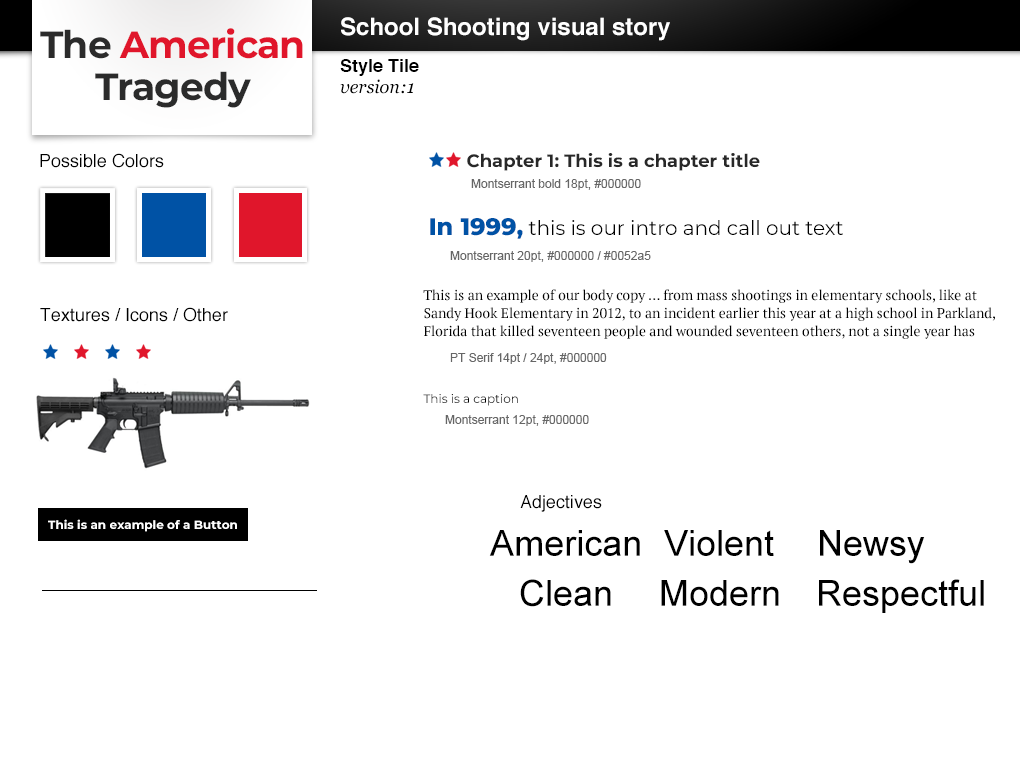
<style>
.page{position:relative;width:1020px;height:760px;background:#ffffff}
.page>*{position:absolute;margin:0}
.t1{font:24px "Helvetica-Bold";color:#ffffff}
.t2{font:37.7px/41.4px "Montserrat-Bold";letter-spacing:-0.025em;color:#e0162b}
.t3{font:37.7px/41.4px "Montserrat-Bold";letter-spacing:-0.025em;color:#2b2b2b}
.t4{font:18px "Helvetica-Bold";color:#000000}
.t5{font:18px "Georgia-Italic";color:#000000}
.t6{font:18px "Helvetica";color:#000000}
.t7{font:18px "Montserrat-Bold";color:#282828}
.t8{font:12px "ArialMT";color:#666666}
.t9{font:20px "Montserrat-Regular";color:#000000}
.t10{font:24px "Montserrat-ExtraBold";color:#0052a5}
.t11{font:14px/18px "PTSerif-Regular";color:#000000}
.t12{font:12px "Montserrat-Regular";color:#000000}
.t13{font:12px "Montserrat-Bold";color:#ffffff}
.t14{font:36px "ArialMT";color:#000000}
</style>
<div class="page">
<p class="t1" style="left:341px;top:17px;width:329px;height:24px">School Shooting visual story</p>
<p class="t2" style="left:40px;top:28px;width:263px;height:80px;text-align:center"><span class="t3">The </span>American<span class="t3"><br>Tragedy</span></p>
<p class="t4" style="left:340px;top:59px;width:79px;height:17px">Style Tile</p>
<p class="t5" style="left:340px;top:79px;width:74px;height:15px">version:1</p>
<p class="t6" style="left:40px;top:153px;width:124px;height:15px">Possible Colors</p>
<p class="t7" style="left:467px;top:153px;width:293px;height:18px">Chapter 1: This is a chapter title</p>
<p class="t8" style="left:471px;top:179px;width:170px;height:11px">Montserrant bold 18pt, #000000</p>
<p class="t9" style="left:430px;top:218px;width:413px;height:21px"><span class="t10">In 1999,</span> this is our intro and call out text</p>
<p class="t8" style="left:450px;top:251px;width:201px;height:11px">Montserrant 20pt, #000000 / #0052a5</p>
<p class="t11" style="left:423px;top:289px;width:572px;height:50px">This is an example of our body copy ... from mass shootings in elementary schools, like at Sandy Hook Elementary in 2012, to an incident earlier this year at a high school in Parkland, Florida that killed seventeen people and wounded seventeen others, not a single year has</p>
<p class="t6" style="left:40px;top:307px;width:188px;height:15px">Textures / Icons / Other</p>
<p class="t8" style="left:450px;top:353px;width:157px;height:11px">PT Serif 14pt / 24pt, #000000</p>
<p class="t12" style="left:423px;top:394px;width:95px;height:12px">This is a caption</p>
<p class="t8" style="left:445px;top:415px;width:144px;height:11px">Montserrant 12pt, #000000</p>
<p class="t6" style="left:520px;top:495px;width:82px;height:17px">Adjectives</p>
<p class="t13" style="left:48px;top:519px;width:189px;height:13px">This is an example of a Button</p>
<p class="t14" style="left:489px;top:530px;width:151px;height:26px">American</p>
<p class="t14" style="left:664px;top:530px;width:110px;height:26px">Violent</p>
<p class="t14" style="left:820px;top:530px;width:105px;height:34px">Newsy</p>
<p class="t14" style="left:520px;top:579px;width:91px;height:28px">Clean</p>
<p class="t14" style="left:661px;top:580px;width:118px;height:26px">Modern</p>
<p class="t14" style="left:819px;top:579px;width:165px;height:34px">Respectful</p>
</div>
